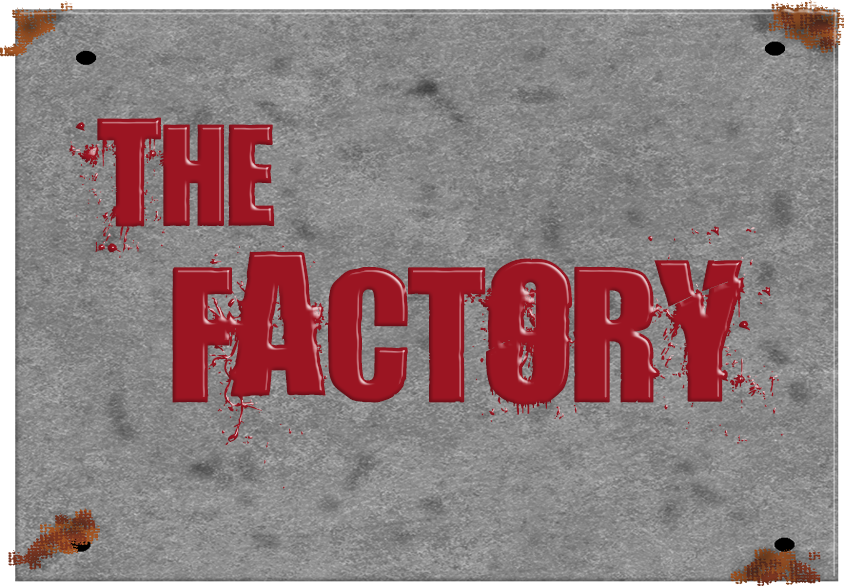
<style>
.page{position:relative;width:844px;height:586px}
.page>*{position:absolute;margin:0}
.t1{font:150px "LivingHell";color:#9b1522}
.t2{font:200px "LivingHell";color:#9b1522}
</style>
<div class="page">
<p class="t1" style="left:69px;top:117px;width:206px;height:141px">The</p>
<p class="t2" style="left:172px;top:226px;width:612px;height:263px">fActOrY</p>
</div>
